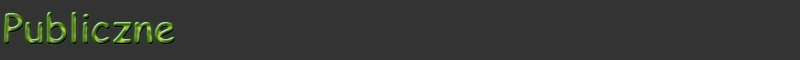
<style>
.page{position:relative;width:800px;height:60px;background:#333333}
.page>*{position:absolute;margin:0}
.t1{font:40px "ComicSansMS-Bold"}
</style>
<div class="page">
<p class="t1" style="left:4px;top:12px;width:171px;height:32px">Publiczne</p>
</div>
